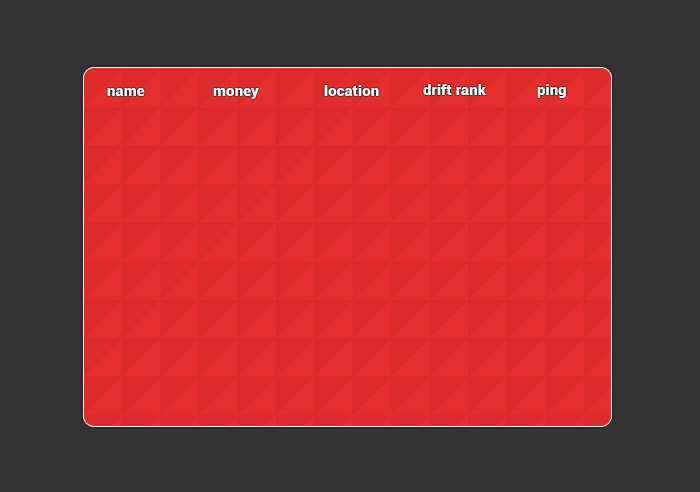
<style>
.page{position:relative;width:700px;height:492px;background:#333333}
.page>*{position:absolute;margin:0}
.t1{font:15.1px "Roboto-Black";color:#ffffff}
</style>
<div class="page">
<p class="t1" style="left:107px;top:88px;width:38px;height:8px">name</p>
<p class="t1" style="left:213px;top:88px;width:46px;height:11px">money</p>
<p class="t1" style="left:324px;top:85px;width:55px;height:11px">location</p>
<p class="t1" style="left:423px;top:84px;width:63px;height:11px">drift rank</p>
<p class="t1" style="left:537px;top:84px;width:29px;height:14px">ping</p>
</div>
